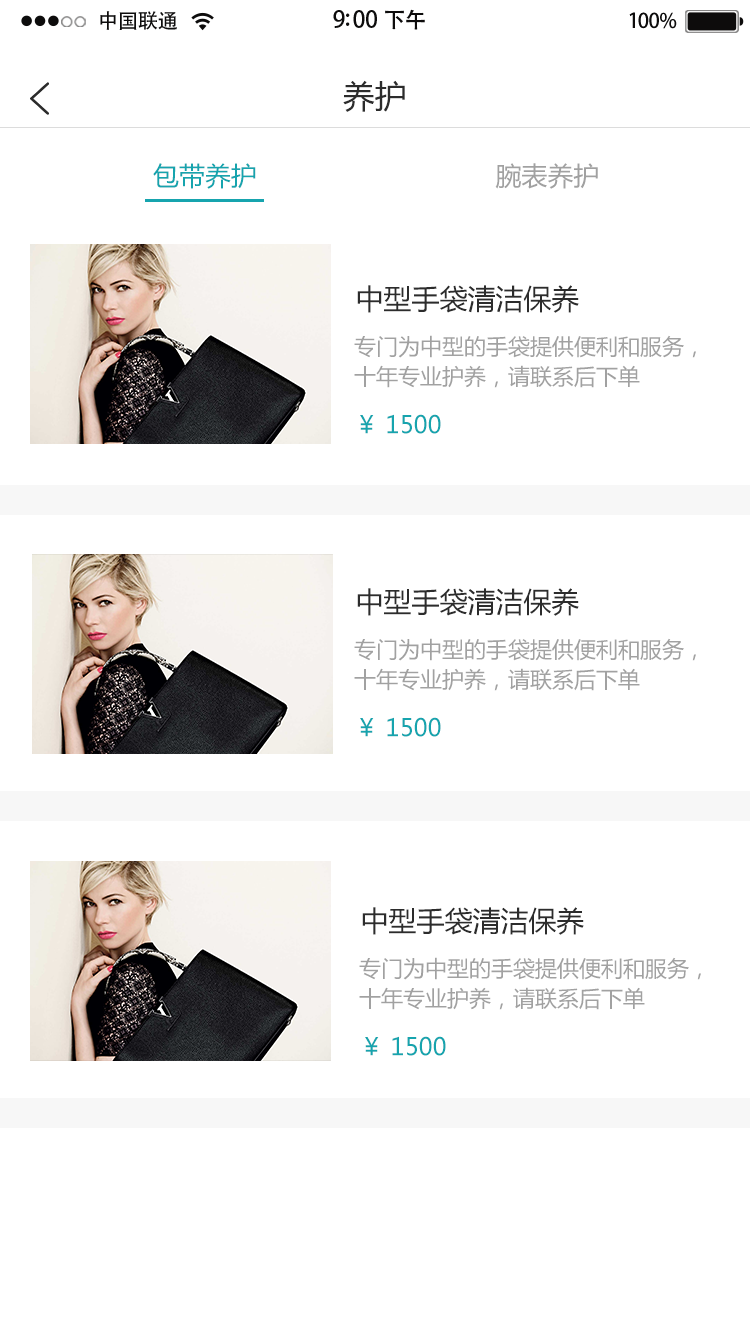
<style>
.page{position:relative;width:750px;height:1334px;background:#ffffff}
.page>*{position:absolute;margin:0}
.t1{font:20.4px "AdobeHeitiStd-Regular";letter-spacing:-0.02em;color:#000000}
.t2{font:23px "AdobeHeitiStd-Regular";letter-spacing:-0.02em;color:#000000}
.t3{font:22px "AdobeHeitiStd-Regular";letter-spacing:-0.02em;color:#000000}
.t4{font:20.4px "AdobeHeitiStd-Regular";letter-spacing:-0.02em;color:#010101}
.t5{font:32px "MicrosoftYaHei";color:#2c2c2c}
.t6{font:26px "MicrosoftYaHei";color:#16a4ae}
.t7{font:26px "MicrosoftYaHei";color:#a1a1a1}
.t8{font:28px "MicrosoftYaHei";color:#2c2c2c}
.t9{font:22px/15px "MicrosoftYaHei";color:#a1a1a1}
.t10{font:24px "MicrosoftYaHei";color:#16a4ae}
</style>
<div class="page">
<p class="t1" style="left:100px;top:11px;width:77px;height:19px">中国联通</p>
<p class="t2" style="left:333px;top:9px;width:92px;height:21px">9:00 <span class="t3">下午</span></p>
<p class="t4" style="left:629px;top:12px;width:48px;height:17px">100%</p>
<p class="t5" style="left:343px;top:80px;width:62px;height:32px">养护</p>
<p class="t6" style="left:153px;top:163px;width:445px;height:26px">包带养护                               <span class="t7">腕表养护</span></p>
<p class="t8" style="left:357px;top:285px;width:222px;height:28px">中型手袋清洁保养</p>
<p class="t9" style="left:354px;top:335px;width:342px;height:53px">专门为中型的手袋提供便利和服务，<br><br>十年专业护养，请联系后下单</p>
<p class="t10" style="left:360px;top:414px;width:81px;height:20px">￥ 1500</p>
<p class="t8" style="left:357px;top:588px;width:222px;height:28px">中型手袋清洁保养</p>
<p class="t9" style="left:354px;top:638px;width:342px;height:53px">专门为中型的手袋提供便利和服务，<br><br>十年专业护养，请联系后下单</p>
<p class="t10" style="left:360px;top:717px;width:81px;height:20px">￥ 1500</p>
<p class="t8" style="left:362px;top:907px;width:222px;height:28px">中型手袋清洁保养</p>
<p class="t9" style="left:359px;top:957px;width:342px;height:53px">专门为中型的手袋提供便利和服务，<br><br>十年专业护养，请联系后下单</p>
<p class="t10" style="left:365px;top:1036px;width:81px;height:20px">￥ 1500</p>
</div>
